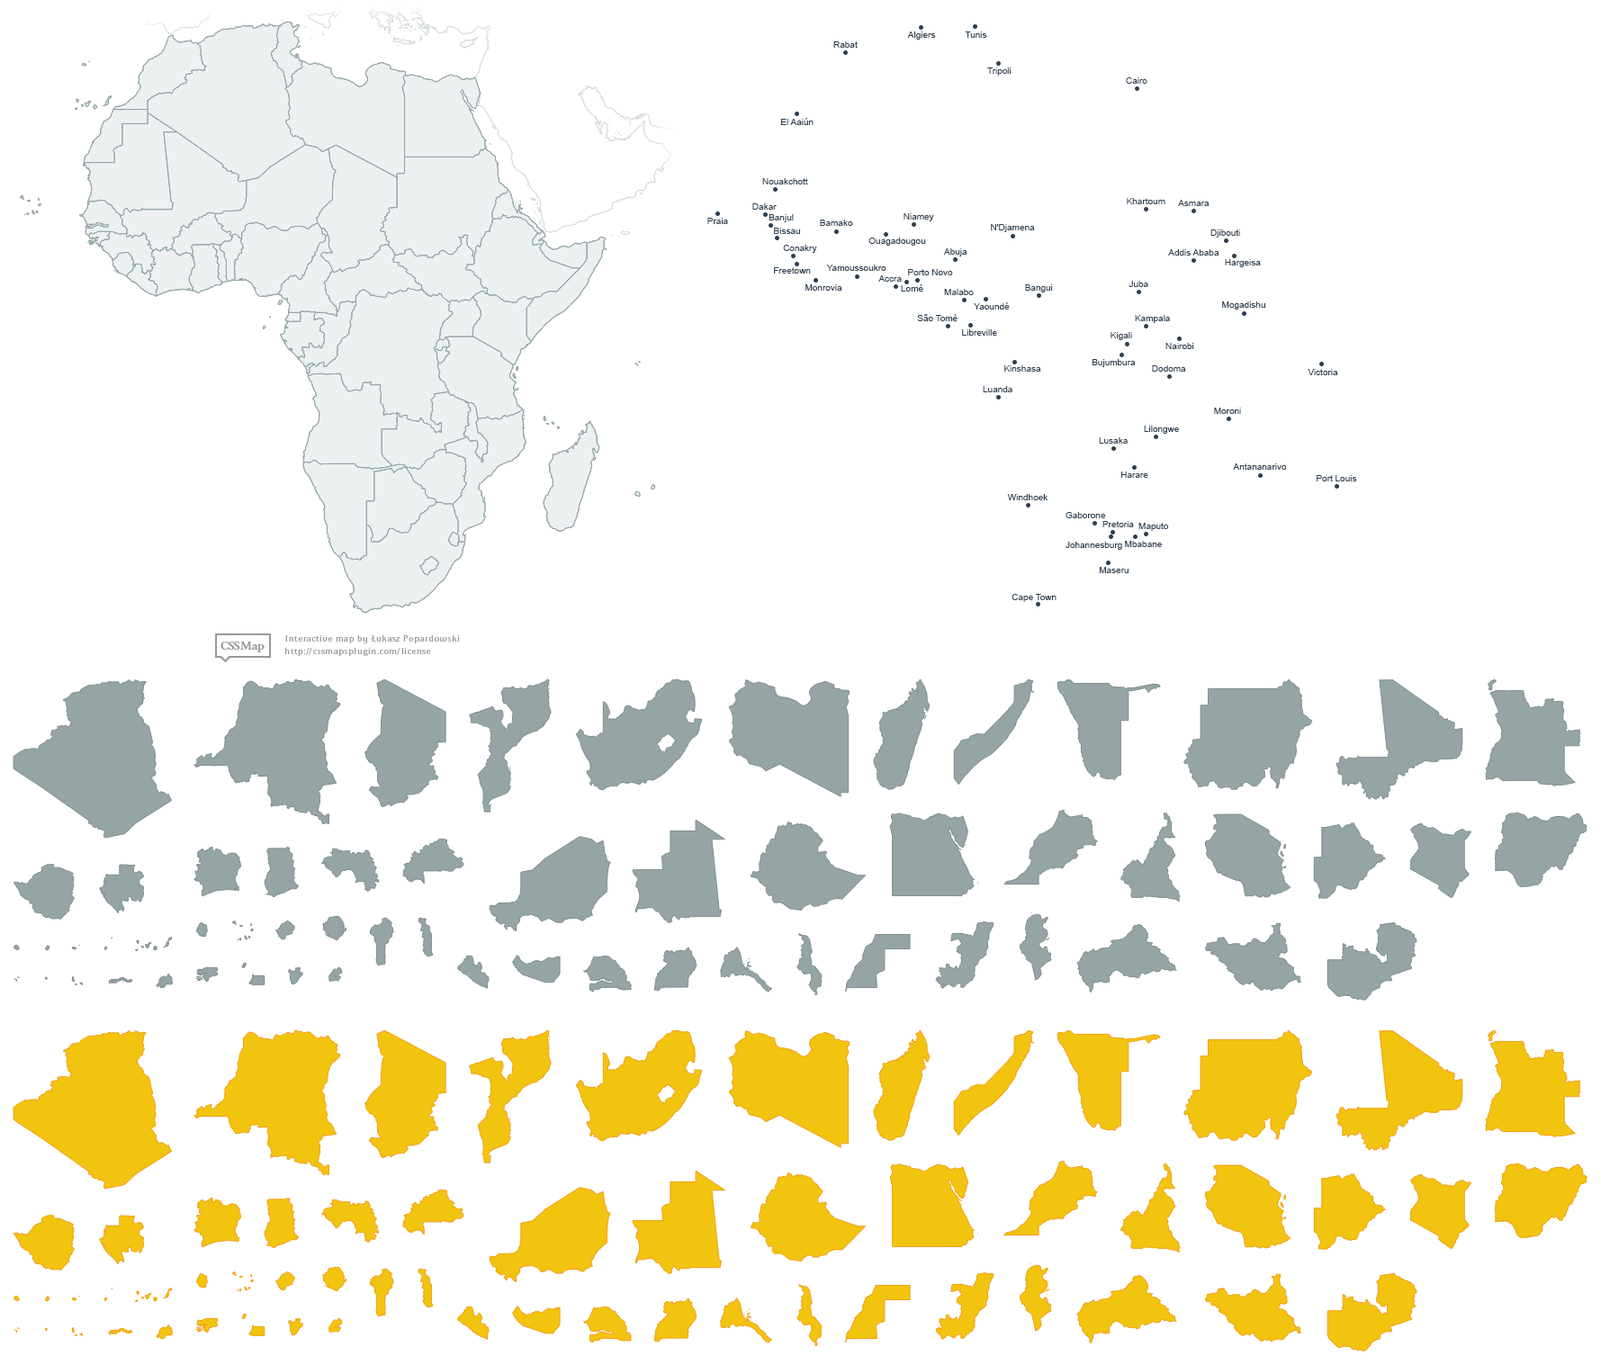
<style>
.page{position:relative;width:1601px;height:1365px;background:#ffffff}
.page>*{position:absolute;margin:0}
.t1{font:9px "ArialMT";color:#2c3e50}
</style>
<div class="page">
<p class="t1" style="left:833px;top:41px;width:25px;height:7px">Rabat</p>
<p class="t1" style="left:907px;top:31px;width:29px;height:9px">Algiers</p>
<p class="t1" style="left:965px;top:31px;width:22px;height:7px">Tunis</p>
<p class="t1" style="left:987px;top:67px;width:25px;height:9px">Tripoli</p>
<p class="t1" style="left:1126px;top:77px;width:21px;height:7px">Cairo</p>
<p class="t1" style="left:781px;top:118px;width:33px;height:7px">El Aaiún</p>
<p class="t1" style="left:762px;top:178px;width:46px;height:6px">Nouakchott</p>
<p class="t1" style="left:1127px;top:198px;width:38px;height:6px">Khartoum</p>
<p class="t1" style="left:752px;top:203px;width:25px;height:7px">Dakar</p>
<p class="t1" style="left:1178px;top:200px;width:32px;height:6px">Asmara</p>
<p class="t1" style="left:707px;top:218px;width:21px;height:6px">Praia</p>
<p class="t1" style="left:769px;top:214px;width:25px;height:8px">Banjul</p>
<p class="t1" style="left:820px;top:220px;width:33px;height:6px">Bamako</p>
<p class="t1" style="left:904px;top:213px;width:30px;height:8px">Niamey</p>
<p class="t1" style="left:774px;top:228px;width:26px;height:6px">Bissau</p>
<p class="t1" style="left:991px;top:224px;width:44px;height:8px">N'Djamena</p>
<p class="t1" style="left:1210px;top:229px;width:30px;height:9px">Djibouti</p>
<p class="t1" style="left:783px;top:245px;width:34px;height:8px">Conakry</p>
<p class="t1" style="left:868px;top:238px;width:58px;height:8px">Ouagadougou</p>
<p class="t1" style="left:943px;top:248px;width:24px;height:8px">Abuja</p>
<p class="t1" style="left:1168px;top:249px;width:51px;height:7px">Addis Ababa</p>
<p class="t1" style="left:774px;top:267px;width:37px;height:7px">Freetown</p>
<p class="t1" style="left:826px;top:265px;width:60px;height:6px">Yamoussoukro</p>
<p class="t1" style="left:908px;top:269px;width:45px;height:6px">Porto Novo</p>
<p class="t1" style="left:1225px;top:259px;width:36px;height:8px">Hargeisa</p>
<p class="t1" style="left:878px;top:275px;width:24px;height:7px">Accra</p>
<p class="t1" style="left:1129px;top:281px;width:19px;height:6px">Juba</p>
<p class="t1" style="left:805px;top:284px;width:37px;height:7px">Monrovia</p>
<p class="t1" style="left:901px;top:284px;width:22px;height:8px">Lomé</p>
<p class="t1" style="left:944px;top:289px;width:30px;height:6px">Malabo</p>
<p class="t1" style="left:1025px;top:284px;width:28px;height:8px">Bangui</p>
<p class="t1" style="left:974px;top:302px;width:36px;height:8px">Yaoundé</p>
<p class="t1" style="left:1222px;top:301px;width:43px;height:9px">Mogadishu</p>
<p class="t1" style="left:917px;top:314px;width:41px;height:7px">São Tomé</p>
<p class="t1" style="left:1135px;top:315px;width:35px;height:8px">Kampala</p>
<p class="t1" style="left:962px;top:329px;width:35px;height:7px">Libreville</p>
<p class="t1" style="left:1111px;top:332px;width:21px;height:8px">Kigali</p>
<p class="t1" style="left:1165px;top:343px;width:29px;height:6px">Nairobi</p>
<p class="t1" style="left:1004px;top:365px;width:37px;height:7px">Kinshasa</p>
<p class="t1" style="left:1092px;top:359px;width:44px;height:8px">Bujumbura</p>
<p class="t1" style="left:1152px;top:365px;width:34px;height:7px">Dodoma</p>
<p class="t1" style="left:1308px;top:369px;width:30px;height:6px">Victoria</p>
<p class="t1" style="left:983px;top:386px;width:29px;height:6px">Luanda</p>
<p class="t1" style="left:1214px;top:408px;width:27px;height:6px">Moroni</p>
<p class="t1" style="left:1144px;top:426px;width:35px;height:8px">Lilongwe</p>
<p class="t1" style="left:1099px;top:437px;width:29px;height:7px">Lusaka</p>
<p class="t1" style="left:1121px;top:472px;width:27px;height:6px">Harare</p>
<p class="t1" style="left:1233px;top:463px;width:54px;height:7px">Antananarivo</p>
<p class="t1" style="left:1317px;top:475px;width:40px;height:6px">Port Louis</p>
<p class="t1" style="left:1007px;top:494px;width:41px;height:6px">Windhoek</p>
<p class="t1" style="left:1066px;top:512px;width:40px;height:6px">Gaborone</p>
<p class="t1" style="left:1102px;top:521px;width:32px;height:6px">Pretoria</p>
<p class="t1" style="left:1138px;top:523px;width:30px;height:8px">Maputo</p>
<p class="t1" style="left:1066px;top:542px;width:56px;height:8px">Johannesburg</p>
<p class="t1" style="left:1125px;top:541px;width:37px;height:6px">Mbabane</p>
<p class="t1" style="left:1099px;top:567px;width:30px;height:6px">Maseru</p>
<p class="t1" style="left:1012px;top:594px;width:45px;height:8px">Cape Town</p>
</div>
